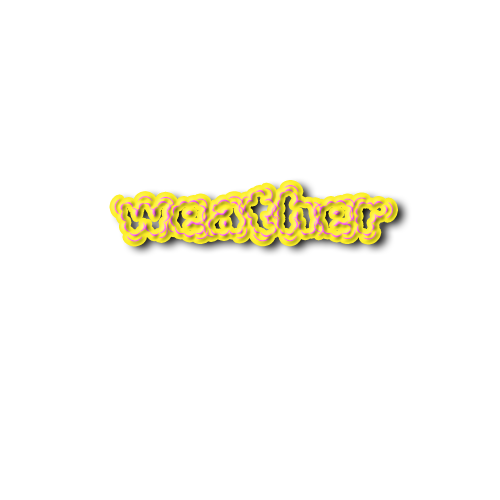
<style>
.page{position:relative;width:500px;height:500px;background:#ffffff}
.page>*{position:absolute;margin:0}
.t1{font:60px "RubikPuddles-Regular"}
</style>
<div class="page">
<p class="t1" style="left:114px;top:185px;width:279px;height:57px">weather</p>
</div>
